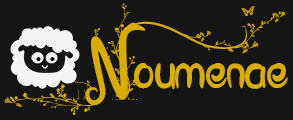
<style>
.page{position:relative;width:293px;height:120px;background:#151515}
.page>*{position:absolute;margin:0}
.t1{font:81.9px "Eglantine";letter-spacing:0.01em;color:#d8ad00;scale:0.85 1}
.t2{font:90px "Eglantine";letter-spacing:0.025em;color:#d8ad00}
.t3{font:81.9px "Eglantine";letter-spacing:0.025em;color:#d8ad00;scale:0.85 1}
</style>
<div class="page">
<p class="t1" style="left:4px;top:3px;width:284px;height:112px"><span class="t2">N</span><span class="t3">o</span>umenae</p>
</div>
